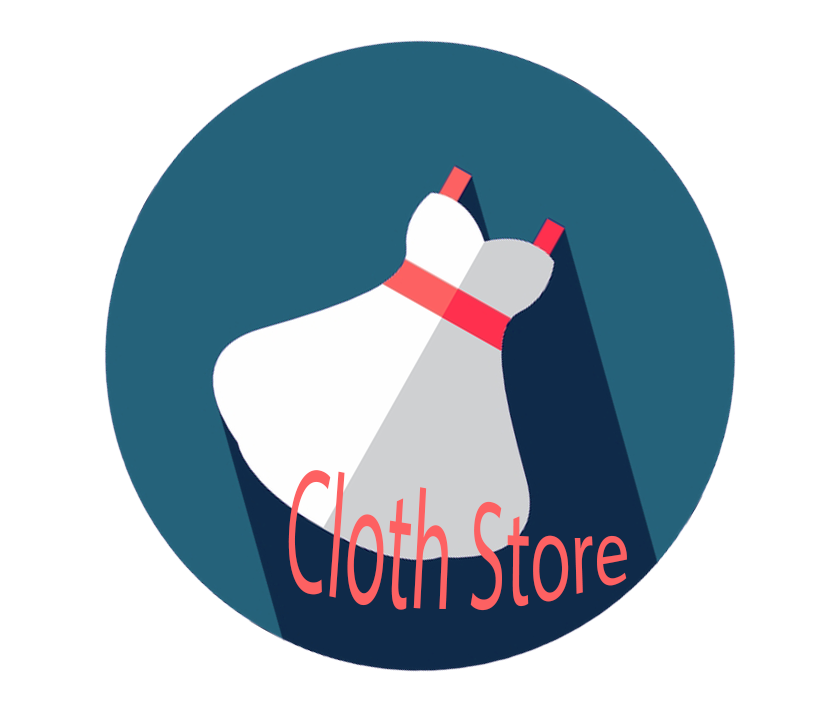
<style>
.page{position:relative;width:840px;height:711px;background:#ffffff}
.page>*{position:absolute;margin:0}
.t1{font:72px "MyriadPro-Regular";color:#fd6162}
</style>
<div class="page">
<p class="t1" style="left:288px;top:470px;width:339px;height:141px;text-align:center">Cloth Store</p>
</div>
